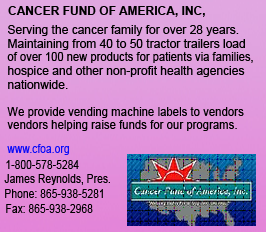
<style>
.page{position:relative;width:266px;height:232px}
.page>*{position:absolute;margin:0}
.t1{font:12px "Arial-BoldMT";color:#000000}
.t2{font:12px "ArialMT";color:#000000}
.t3{font:12px "ArialMT";color:#000000;scale:0.93 1}
.t4{font:12px "ArialMT";color:#000000;scale:0.95 1}
.t5{font:12px "ArialMT";color:#0b0bf9;scale:0.86 1}
.t6{font:12px "ArialMT";color:#000000;scale:0.86 1}
</style>
<div class="page">
<p class="t1" style="left:8px;top:6px;width:197px;height:11px">CANCER FUND OF AMERICA, INC,</p>
<p class="t2" style="left:8px;top:25px;width:231px;height:11px">Serving the cancer family for over 28 years.</p>
<p class="t2" style="left:8px;top:39px;width:237px;height:11px">Maintaining from 40 to 50 tractor trailers load</p>
<p class="t3" style="left:7px;top:52px;width:246px;height:11px">of over 100 new products for patients via families,</p>
<p class="t2" style="left:8px;top:66px;width:237px;height:11px">hospice and other non-profit health agencies</p>
<p class="t2" style="left:8px;top:80px;width:60px;height:9px">nationwide.</p>
<p class="t4" style="left:7px;top:107px;width:237px;height:11px">We provide vending machine labels to vendors</p>
<p class="t4" style="left:7px;top:120px;width:230px;height:11px">vendors helping raise funds for our programs.</p>
<p class="t5" style="left:7px;top:144px;width:62px;height:11px">www.cfoa.org</p>
<p class="t6" style="left:6px;top:160px;width:73px;height:9px">1-800-578-5284</p>
<p class="t6" style="left:4px;top:174px;width:106px;height:11px">James Reynolds, Pres.</p>
<p class="t6" style="left:5px;top:189px;width:98px;height:9px">Phone: 865-938-5281</p>
<p class="t6" style="left:6px;top:204px;width:87px;height:9px">Fax: 865-938-2968</p>
</div>
